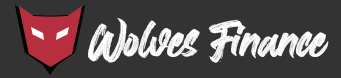
<style>
.page{position:relative;width:341px;height:78px;background:#333333}
.page>*{position:absolute;margin:0}
.t1{font:41.3px "DarkCrowItalicPERSONALUSE";letter-spacing:-0.025em;color:#ffffff}
</style>
<div class="page">
<p class="t1" style="left:88px;top:18px;width:241px;height:45px">Wolves Finance</p>
</div>
